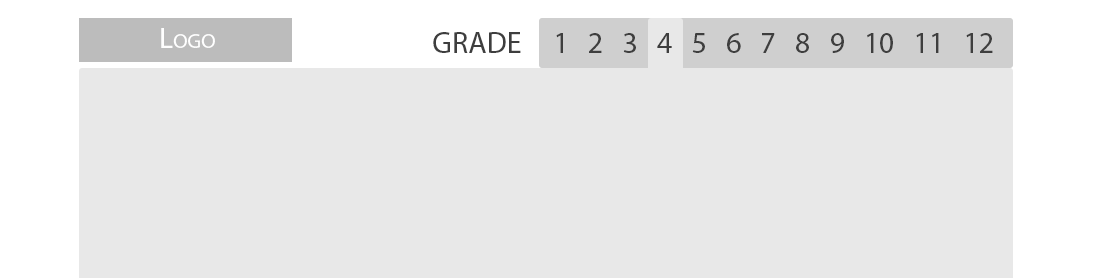
<style>
.page{position:relative;width:1097px;height:278px;background:#e8e8e8}
.page>*{position:absolute;margin:0}
.t1{font:29.2px "MyriadPro-Regular";color:#ffffff;font-variant:small-caps}
.t2{font:30px "MyriadPro-Regular";color:#3e3e3e;text-transform:uppercase}
</style>
<div class="page">
<p class="t1" style="left:161px;top:28px;width:54px;height:20px">Logo</p>
<p class="t2" style="left:433px;top:32px;width:88px;height:21px">Grade</p>
<p class="t2" style="left:556px;top:33px;width:437px;height:20px">1   2   3   4   5   6   7   8   9   10   11   12</p>
</div>
